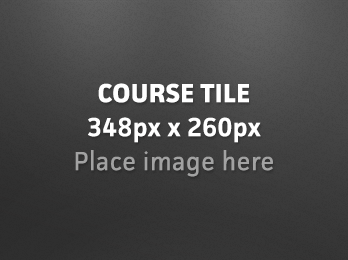
<style>
.page{position:relative;width:348px;height:260px}
.page>*{position:absolute;margin:0}
.t1{font:26px/34px "Facit-Regular";letter-spacing:0.02em;color:#a2a2a2}
.t2{font:26px/34px "Facit-Bold";letter-spacing:0.02em;color:#ffffff}
.t3{font:26px/34px "Facit-Semibold";letter-spacing:0.02em;color:#ffffff}
</style>
<div class="page">
<p class="t1" style="left:75px;top:83px;width:198px;height:94px;text-align:center"><span class="t2">COURSE TILE<br></span><span class="t3">348px x 260px<br></span>Place image here</p>
</div>
